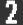
<style>
.page{position:relative;width:23px;height:25px;background:#333333}
.page>*{position:absolute;margin:0}
.t1{font:38.9px "VT323-Regular";color:#ffffff;font-weight:bold;scale:0.9 1}
</style>
<div class="page">
<p class="t1" style="left:5px;top:0px;width:12px;height:24px">2</p>
</div>
